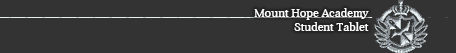
<style>
.page{position:relative;width:456px;height:53px;background:#333333}
.page>*{position:absolute;margin:0}
.t1{font:12px "Aver";color:#ffffff}
</style>
<div class="page">
<p class="t1" style="left:254px;top:8px;width:115px;height:23px;text-align:right">Mount Hope Academy<br>Student Tablet</p>
</div>
